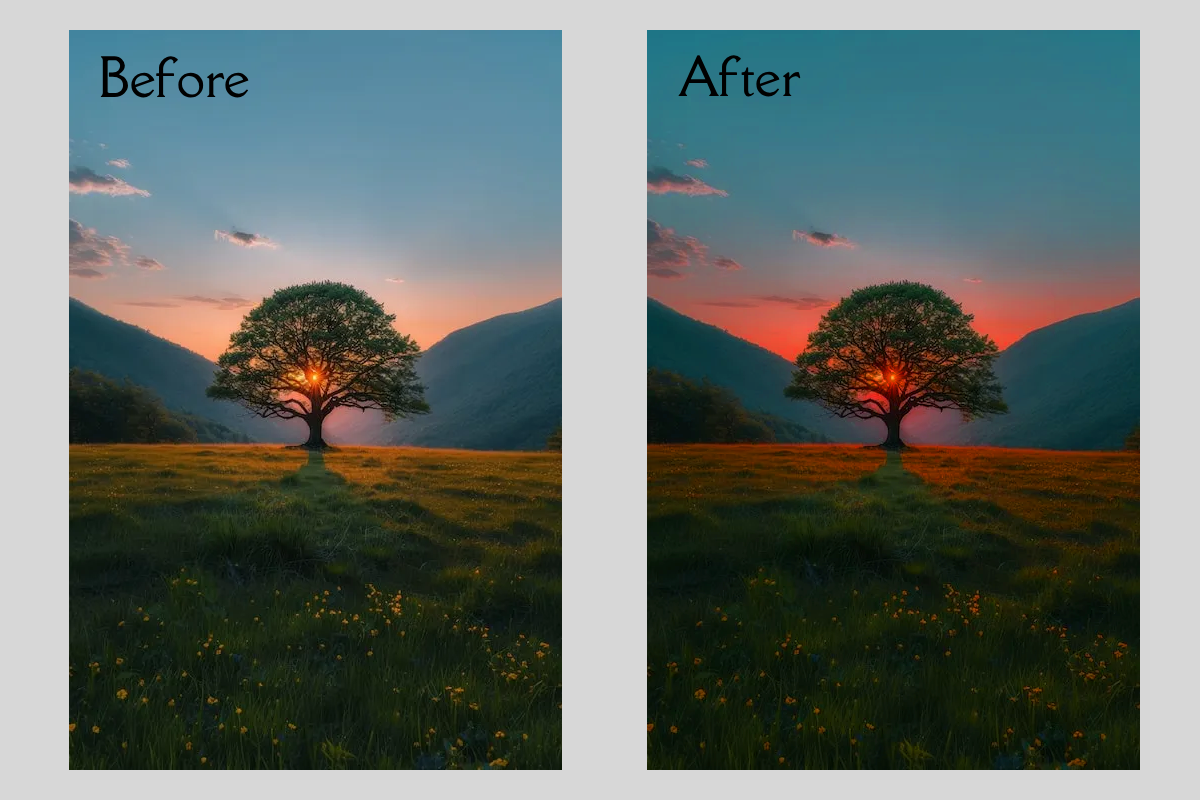
<style>
.page{position:relative;width:1200px;height:800px;background:#d7d7d7}
.page>*{position:absolute;margin:0}
.t1{font:51px "DellaRespira-Regular";color:#000000}
</style>
<div class="page">
<p class="t1" style="left:100px;top:56px;width:149px;height:42px">Before</p>
<p class="t1" style="left:678px;top:55px;width:123px;height:42px">After</p>
</div>
